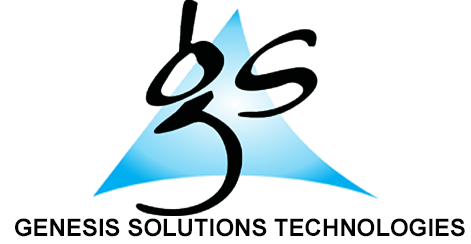
<style>
.page{position:relative;width:471px;height:244px;background:#ffffff}
.page>*{position:absolute;margin:0}
.t1{font:24px "Arial-BoldMT";color:#000302}
</style>
<div class="page">
<p class="t1" style="left:15px;top:218px;width:450px;height:19px">GENESIS SOLUTIONS TECHNOLOGIES</p>
</div>
